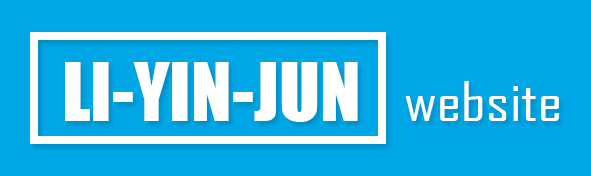
<style>
.page{position:relative;width:591px;height:176px;background:#00a7e6}
.page>*{position:absolute;margin:0}
.t1{font:75px "Impact";color:#ffffff}
.t2{font:52.2px "AgencyFB-Reg";color:#ffffff;scale:1.25 1}
</style>
<div class="page">
<p class="t1" style="left:65px;top:62px;width:293px;height:60px">LI-YIN-JUN</p>
<p class="t2" style="left:405px;top:81px;width:154px;height:40px">website</p>
</div>
